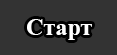
<style>
.page{position:relative;width:117px;height:55px;background:#333333}
.page>*{position:absolute;margin:0}
.t1{font:24px "TimesNewRomanPS-BoldMT";color:#ffffff}
</style>
<div class="page">
<p class="t1" style="left:27px;top:19px;width:65px;height:21px">Старт</p>
</div>
